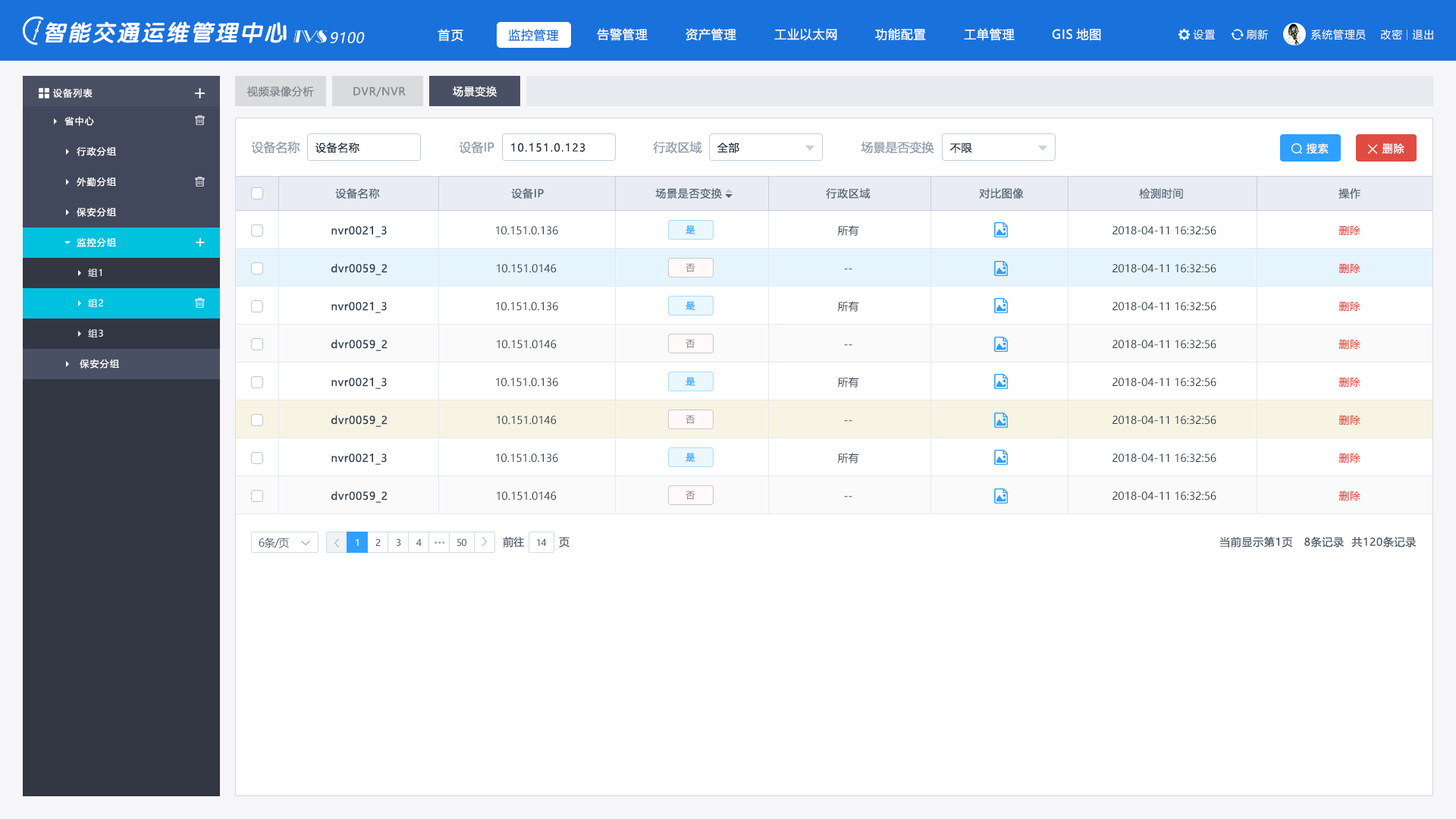
<style>
.page{position:relative;width:1456px;height:819px;background:#ffffff}
.page>*{position:absolute;margin:0}
.t1{font:22.7px "VeraSansYuanTiMono-BoldItalic";letter-spacing:0.08em;color:#ffffff}
.t2{font:12.1px "MicrosoftYaHei";letter-spacing:0.1em;color:#fefeff}
.t3{font:12.1px "MicrosoftYaHei";letter-spacing:0.05em;color:#1971dc}
.t4{font:12.1px "MicrosoftYaHei";letter-spacing:0.05em;color:#ffffff}
.t5{font:10.6px "MicrosoftYaHei";letter-spacing:0.05em;color:#ffffff}
.t6{font:14.2px "MicrosoftYaHei";letter-spacing:0.03em;color:#ffffff;font-style:italic}
.t7{font:9.1px "MicrosoftYaHei";letter-spacing:0.1em;color:#ffffff}
.t8{font:10.6px "MicrosoftYaHei";letter-spacing:0.05em;color:#7e8388}
.t9{font:12.1px "MicrosoftYaHei";color:#8e9aad}
.t10{font:10.6px "MicrosoftYaHei";letter-spacing:0.05em;color:#1f2d3d}
.t11{font:10.6px "MicrosoftYaHei";letter-spacing:0.1em;color:#1f2d3d}
.t12{font:10.6px "MicrosoftYaHei";letter-spacing:0.05em;color:#fefeff}
.t13{font:19.5px "PingFang-SC-Regular";letter-spacing:0.06em;color:#ffffff}
.t14{font:10.6px "MicrosoftYaHei";letter-spacing:0.05em;color:#546477}
.t15{font:10.6px "MicrosoftYaHei";letter-spacing:0.05em;color:#2c3c4d}
.t16{font:10.6px "MicrosoftYaHei";color:#2c3c4d}
.t17{font:9.1px "MicrosoftYaHei";color:#2fa0ff}
.t18{font:10.6px "MicrosoftYaHei";letter-spacing:0.05em;color:#e04c41}
.t19{font:9.1px "MicrosoftYaHei";color:#989898}
.t20{font:10.6px "MicrosoftYaHei"}
.t21{font:10.6px "MicrosoftYaHei";letter-spacing:-0.05em;color:#4a586b}
.t22{font:9.1px "MicrosoftYaHei";letter-spacing:-0.05em}
.t23{font:9.1px "MicrosoftYaHei";letter-spacing:-0.05em;color:#4c5a6d}
.t24{font:10.6px "MicrosoftYaHei";color:#4a586b}
.t25{font:10.6px "MicrosoftYaHei";letter-spacing:0.05em;color:#4a586b}
</style>
<div class="page">
<p class="t1" style="left:45px;top:21px;width:242px;height:22px">智能交通运维管理中心</p>
<p class="t2" style="left:438px;top:29px;width:25px;height:13px">首页</p>
<p class="t3" style="left:508px;top:29px;width:51px;height:13px">监控管理</p>
<p class="t4" style="left:597px;top:28px;width:51px;height:13px">告警管理</p>
<p class="t4" style="left:686px;top:28px;width:50px;height:13px">资产管理</p>
<p class="t4" style="left:774px;top:28px;width:63px;height:13px">工业以太网</p>
<p class="t4" style="left:875px;top:28px;width:51px;height:13px">功能配置</p>
<p class="t4" style="left:964px;top:28px;width:51px;height:13px">工单管理</p>
<p class="t4" style="left:1053px;top:28px;width:48px;height:13px">GIS地图</p>
<p class="t5" style="left:1193px;top:30px;width:23px;height:10px">设置</p>
<p class="t5" style="left:1246px;top:29px;width:22px;height:11px">刷新</p>
<p class="t5" style="left:1310px;top:29px;width:56px;height:11px">系统管理员</p>
<p class="t5" style="left:1381px;top:29px;width:21px;height:11px">改密</p>
<p class="t5" style="left:1412px;top:30px;width:21px;height:10px">退出</p>
<p class="t6" style="left:330px;top:32px;width:35px;height:11px">9100</p>
<p class="t7" style="left:53px;top:88px;width:40px;height:10px">设备列表</p>
<p class="t8" style="left:247px;top:86px;width:67px;height:11px">视频录像分析</p>
<p class="t8" style="left:353px;top:86px;width:53px;height:11px">DVR/NVR</p>
<p class="t5" style="left:453px;top:86px;width:44px;height:11px">场景变换</p>
<p class="t7" style="left:64px;top:116px;width:30px;height:10px">省中心</p>
<p class="t7" style="left:77px;top:146px;width:39px;height:10px">行政分组</p>
<p class="t9" style="left:251px;top:141px;width:49px;height:13px">设备名称</p>
<p class="t10" style="left:315px;top:142px;width:44px;height:11px">设备名称</p>
<p class="t9" style="left:459px;top:141px;width:35px;height:13px">设备IP</p>
<p class="t11" style="left:511px;top:143px;width:74px;height:9px">10.151.0.123</p>
<p class="t9" style="left:653px;top:141px;width:49px;height:13px">行政区域</p>
<p class="t10" style="left:717px;top:143px;width:22px;height:10px">全部</p>
<p class="t9" style="left:861px;top:141px;width:73px;height:13px">场景是否变换</p>
<p class="t10" style="left:949px;top:143px;width:23px;height:10px">不限</p>
<p class="t12" style="left:1307px;top:143px;width:22px;height:11px">搜索</p>
<p class="t13" style="left:1368px;top:144px;width:10px;height:10px">×</p>
<p class="t12" style="left:1382px;top:143px;width:22px;height:11px">删除</p>
<p class="t7" style="left:77px;top:177px;width:39px;height:10px">外勤分组</p>
<p class="t14" style="left:335px;top:188px;width:45px;height:11px">设备名称</p>
<p class="t14" style="left:511px;top:188px;width:33px;height:11px">设备IP</p>
<p class="t14" style="left:655px;top:188px;width:67px;height:11px">场景是否变换</p>
<p class="t14" style="left:826px;top:188px;width:45px;height:11px">行政区域</p>
<p class="t14" style="left:979px;top:188px;width:45px;height:11px">对比图像</p>
<p class="t14" style="left:1139px;top:188px;width:44px;height:11px">检测时间</p>
<p class="t14" style="left:1338px;top:188px;width:22px;height:11px">操作</p>
<p class="t7" style="left:77px;top:207px;width:39px;height:10px">保安分组</p>
<p class="t15" style="left:331px;top:226px;width:56px;height:11px">nvr0021_3</p>
<p class="t16" style="left:496px;top:226px;width:62px;height:9px">10.151.0.136</p>
<p class="t17" style="left:686px;top:225px;width:9px;height:9px">是</p>
<p class="t16" style="left:837px;top:225px;width:22px;height:11px">所有</p>
<p class="t16" style="left:1112px;top:226px;width:104px;height:9px">2018-04-11 16:32:56</p>
<p class="t18" style="left:1338px;top:226px;width:22px;height:9px">删除</p>
<p class="t7" style="left:77px;top:237px;width:39px;height:10px">监控分组</p>
<p class="t7" style="left:88px;top:268px;width:14px;height:9px">组1</p>
<p class="t15" style="left:331px;top:263px;width:57px;height:12px">dvr0059_2</p>
<p class="t16" style="left:497px;top:264px;width:60px;height:9px">10.151.0146</p>
<p class="t19" style="left:686px;top:263px;width:9px;height:9px">否</p>
<p class="t20" style="left:844px;top:268px;width:8px;height:2px">--</p>
<p class="t16" style="left:1112px;top:264px;width:104px;height:9px">2018-04-11 16:32:56</p>
<p class="t18" style="left:1338px;top:264px;width:22px;height:9px">删除</p>
<p class="t7" style="left:88px;top:299px;width:15px;height:8px">组2</p>
<p class="t15" style="left:331px;top:302px;width:56px;height:11px">nvr0021_3</p>
<p class="t16" style="left:496px;top:302px;width:62px;height:9px">10.151.0.136</p>
<p class="t17" style="left:686px;top:301px;width:9px;height:9px">是</p>
<p class="t16" style="left:837px;top:301px;width:22px;height:11px">所有</p>
<p class="t16" style="left:1112px;top:302px;width:104px;height:9px">2018-04-11 16:32:56</p>
<p class="t18" style="left:1338px;top:302px;width:22px;height:9px">删除</p>
<p class="t7" style="left:88px;top:329px;width:15px;height:8px">组3</p>
<p class="t15" style="left:331px;top:339px;width:57px;height:12px">dvr0059_2</p>
<p class="t16" style="left:497px;top:340px;width:60px;height:9px">10.151.0146</p>
<p class="t19" style="left:686px;top:339px;width:9px;height:9px">否</p>
<p class="t16" style="left:1112px;top:340px;width:104px;height:9px">2018-04-11 16:32:56</p>
<p class="t18" style="left:1338px;top:340px;width:22px;height:9px">删除</p>
<p class="t20" style="left:844px;top:344px;width:8px;height:2px">--</p>
<p class="t7" style="left:80px;top:359px;width:39px;height:10px">保安分组</p>
<p class="t15" style="left:331px;top:378px;width:56px;height:11px">nvr0021_3</p>
<p class="t16" style="left:496px;top:378px;width:62px;height:9px">10.151.0.136</p>
<p class="t17" style="left:686px;top:377px;width:9px;height:9px">是</p>
<p class="t16" style="left:837px;top:377px;width:22px;height:11px">所有</p>
<p class="t16" style="left:1112px;top:378px;width:104px;height:9px">2018-04-11 16:32:56</p>
<p class="t18" style="left:1338px;top:378px;width:22px;height:9px">删除</p>
<p class="t15" style="left:331px;top:415px;width:57px;height:12px">dvr0059_2</p>
<p class="t16" style="left:497px;top:416px;width:60px;height:9px">10.151.0146</p>
<p class="t19" style="left:686px;top:415px;width:9px;height:9px">否</p>
<p class="t20" style="left:844px;top:420px;width:8px;height:2px">--</p>
<p class="t16" style="left:1112px;top:416px;width:104px;height:9px">2018-04-11 16:32:56</p>
<p class="t18" style="left:1338px;top:416px;width:22px;height:9px">删除</p>
<p class="t15" style="left:331px;top:453px;width:56px;height:12px">nvr0021_3</p>
<p class="t16" style="left:496px;top:453px;width:62px;height:10px">10.151.0.136</p>
<p class="t17" style="left:686px;top:453px;width:9px;height:9px">是</p>
<p class="t16" style="left:837px;top:453px;width:22px;height:10px">所有</p>
<p class="t16" style="left:1112px;top:453px;width:104px;height:10px">2018-04-11 16:32:56</p>
<p class="t18" style="left:1338px;top:453px;width:22px;height:10px">删除</p>
<p class="t15" style="left:331px;top:491px;width:57px;height:12px">dvr0059_2</p>
<p class="t16" style="left:497px;top:491px;width:60px;height:9px">10.151.0146</p>
<p class="t19" style="left:686px;top:491px;width:9px;height:9px">否</p>
<p class="t20" style="left:844px;top:496px;width:8px;height:1px">--</p>
<p class="t16" style="left:1112px;top:491px;width:104px;height:9px">2018-04-11 16:32:56</p>
<p class="t18" style="left:1338px;top:491px;width:22px;height:9px">删除</p>
<p class="t21" style="left:259px;top:538px;width:30px;height:10px">6条/页</p>
<p class="t22" style="left:356px;top:538px;width:3px;height:8px">1</p>
<p class="t23" style="left:375px;top:538px;width:6px;height:8px">2</p>
<p class="t23" style="left:396px;top:538px;width:5px;height:8px">3</p>
<p class="t23" style="left:416px;top:538px;width:6px;height:8px">4</p>
<p class="t23" style="left:457px;top:538px;width:9px;height:8px">50</p>
<p class="t24" style="left:503px;top:536px;width:21px;height:12px">前往</p>
<p class="t23" style="left:537px;top:538px;width:10px;height:8px">14</p>
<p class="t24" style="left:559px;top:537px;width:11px;height:11px">页</p>
<p class="t25" style="left:1219px;top:536px;width:198px;height:12px">当前显示第1页   8条记录  共120条记录</p>
</div>
